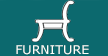
<style>
.page{position:relative;width:108px;height:56px;background:#0c696e}
.page>*{position:absolute;margin:0}
.t1{font:12px "Verdana";color:#fdfef9;scale:1.05 1}
</style>
<div class="page">
<p class="t1" style="left:16px;top:45px;width:73px;height:10px">FURNITURE</p>
</div>
